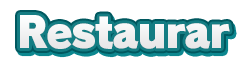
<style>
.page{position:relative;width:250px;height:64px;background:#ffffff}
.page>*{position:absolute;margin:0}
.t1{font:42.7px "RodinPro-UB";letter-spacing:-0.042em;color:#f0f0f0}
</style>
<div class="page">
<p class="t1" style="left:20px;top:15px;width:210px;height:34px">Restaurar</p>
</div>
